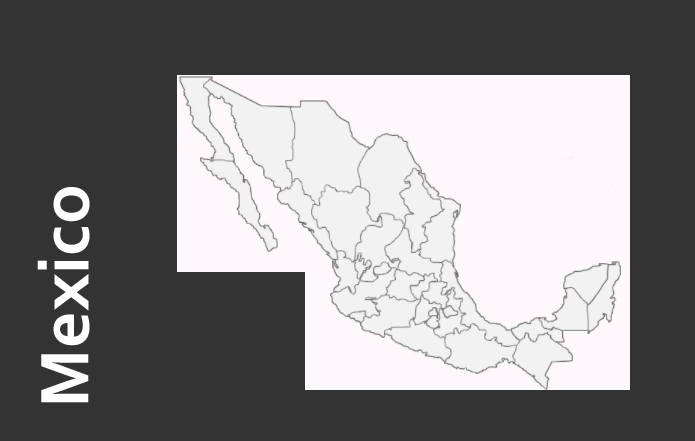
<style>
.page{position:relative;width:695px;height:441px;background:#333333}
.page>*{position:absolute;margin:0}
.t1{font:72px "Corbel-Bold";color:#ffffff}
</style>
<div class="page">
<p class="t1" style="left:37px;top:187px;width:53px;height:216px;rotate:-90deg">Mexico</p>
</div>
